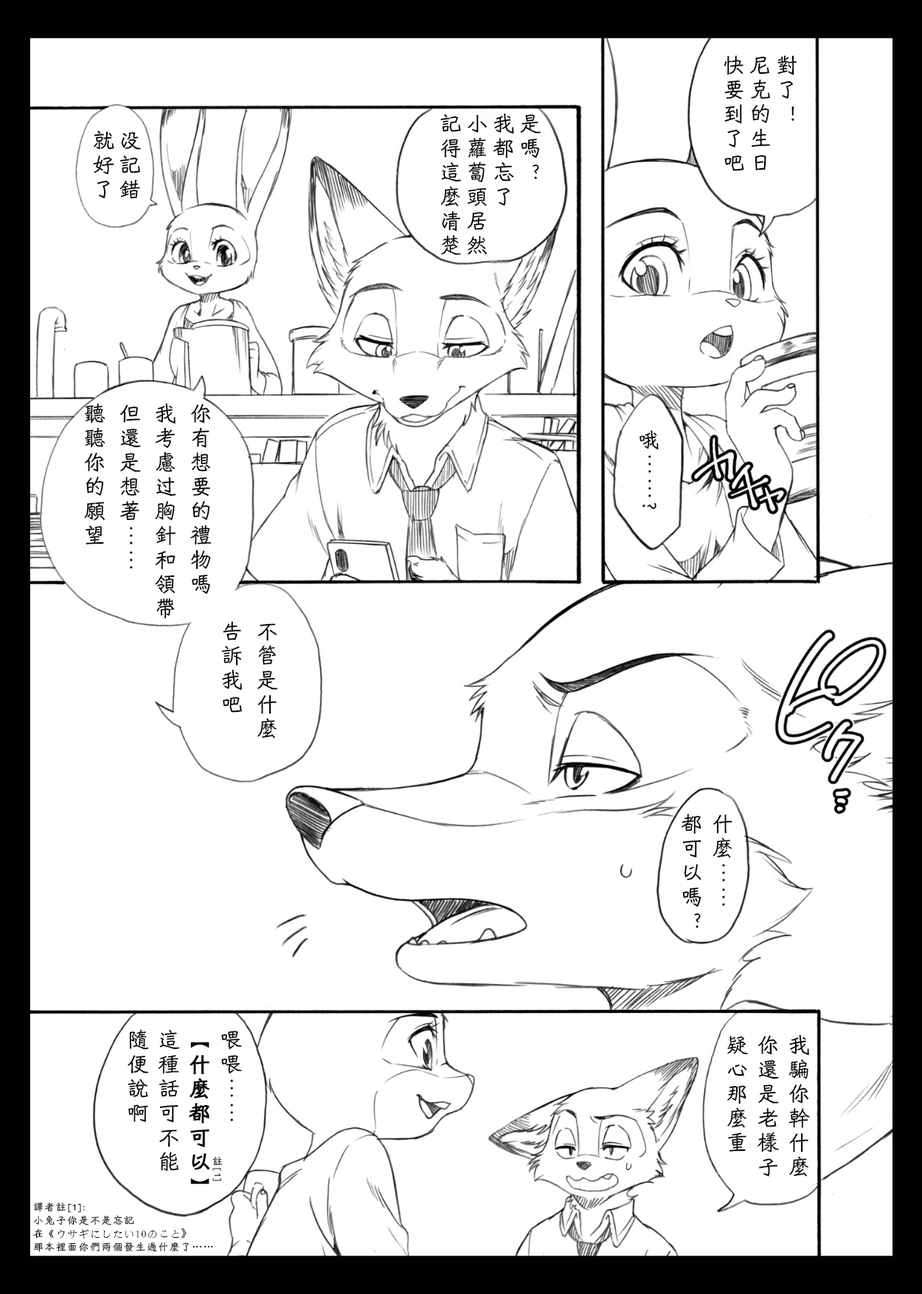
<style>
.page{position:relative;width:922px;height:1294px;background:#ffffff}
.page>*{position:absolute;margin:0}
.t1{font:22.1px/26.5px "HYShiWei55U";letter-spacing:0.1em;color:#000000}
.t2{font:22.1px/35.4px "HYShiWei55U";letter-spacing:0.1em;color:#000000}
.t3{font:22.1px/31px "HYShiWei55U";letter-spacing:0.1em;color:#000000}
.t4{font:22.1px/31px "HYShiWei55U";letter-spacing:0.1em;color:#000000;font-weight:bold}
.t5{font:10.3px/31px "HYShiWei55U";letter-spacing:0.1em;color:#000000}
.t6{font:10.3px/13.3px "HYShiWei55U";letter-spacing:0.1em;color:#000000}
.t7{font:10.3px/13.3px "STFangsong";letter-spacing:0.1em;color:#000000}
.t8{font:10.3px/13.3px "KozGoPr6N-Regular";letter-spacing:0.1em;color:#000000}
.t9{font:10.3px/13.3px "AdobeHeitiStd-Regular";letter-spacing:0.1em;color:#000000}
</style>
<div class="page">
<p class="t1" style="left:723px;top:55px;width:73px;height:116px">對了！<br>尼克的生日<br>快要到了吧</p>
<p class="t1" style="left:440px;top:113px;width:101px;height:142px">是嗎？<br>我都忘了<br>小蘿蔔頭居然<br>記得這麼清楚</p>
<p class="t1" style="left:93px;top:131px;width:48px;height:68px">没記錯<br>就好了</p>
<p class="t2" style="left:84px;top:403px;width:127px;height:216px">你有想要的禮物嗎<br>我考慮过胸針和領帶<br>但還是想著……<br>聽聽你的願望</p>
<p class="t2" style="left:639px;top:430px;width:20px;height:79px">哦……?</p>
<p class="t2" style="left:221px;top:621px;width:57px;height:117px">不管是什麼<br>告訴我吧</p>
<p class="t3" style="left:681px;top:813px;width:51px;height:115px">什麼……<br>都可以嗎？</p>
<p class="t3" style="left:128px;top:1029px;width:114px;height:155px">喂喂……<br><span class="t4">【什麼都可以】<br></span>這種話可不能<br>隨便說啊</p>
<p class="t3" style="left:727px;top:1034px;width:83px;height:142px">我騙你幹什麼<br>你還是老樣子<br>疑心那麼重</p>
<p class="t5" style="left:212px;top:1156px;width:11px;height:25px">註[1]</p>
<p class="t6" style="left:33px;top:1201px;width:180px;height:50px">譯者註[1]:<br>小兔子你是不是忘記<br>在《<span class="t7">ウサギにしたい10のこと</span><span class="t8">》<br></span>那本裡面你們兩個發生過什麼了<span class="t9">……</span></p>
</div>
